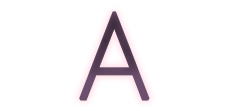
<style>
.page{position:relative;width:229px;height:111px;background:#ffffff}
.page>*{position:absolute;margin:0}
.t1{font:118px "GeosansLight";color:#574058;font-weight:bold}
</style>
<div class="page">
<p class="t1" style="left:79px;top:11px;width:71px;height:90px">A</p>
</div>
